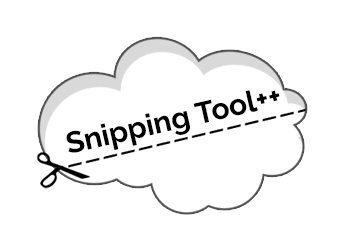
<style>
.page{position:relative;width:344px;height:252px;background:#ffffff}
.page>*{position:absolute;margin:0}
.t1{font:30px "Raleway-Bold";color:#000000}
</style>
<div class="page">
<p class="t1" style="left:66px;top:90px;width:214px;height:63px;rotate:-13deg">Snipping Tool++</p>
</div>
